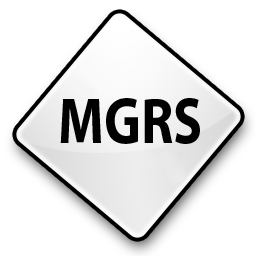
<style>
.page{position:relative;width:256px;height:256px;background:#ffffff}
.page>*{position:absolute;margin:0}
.t1{font:66px "MyriadPro-Bold";letter-spacing:0.005em;color:#010101;scale:0.82 1}
</style>
<div class="page">
<p class="t1" style="left:60px;top:98px;width:140px;height:46px">MGRS</p>
</div>
